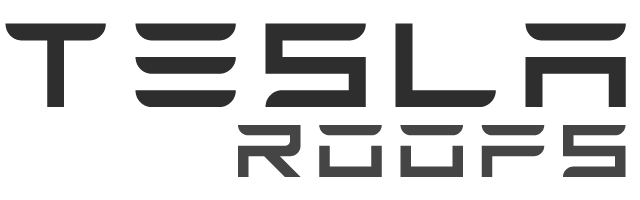
<style>
.page{position:relative;width:640px;height:200px;background:#ffffff}
.page>*{position:absolute;margin:0}
.t1{font:133.3px "TESLA";letter-spacing:0.1em;color:#2e2e2e}
.t2{font:83.3px "TESLA";letter-spacing:0.1em;color:#454545}
</style>
<div class="page">
<p class="t1" style="left:5px;top:23px;width:621px;height:84px">TESLA</p>
<p class="t2" style="left:238px;top:125px;width:388px;height:52px">ROOFS</p>
</div>
